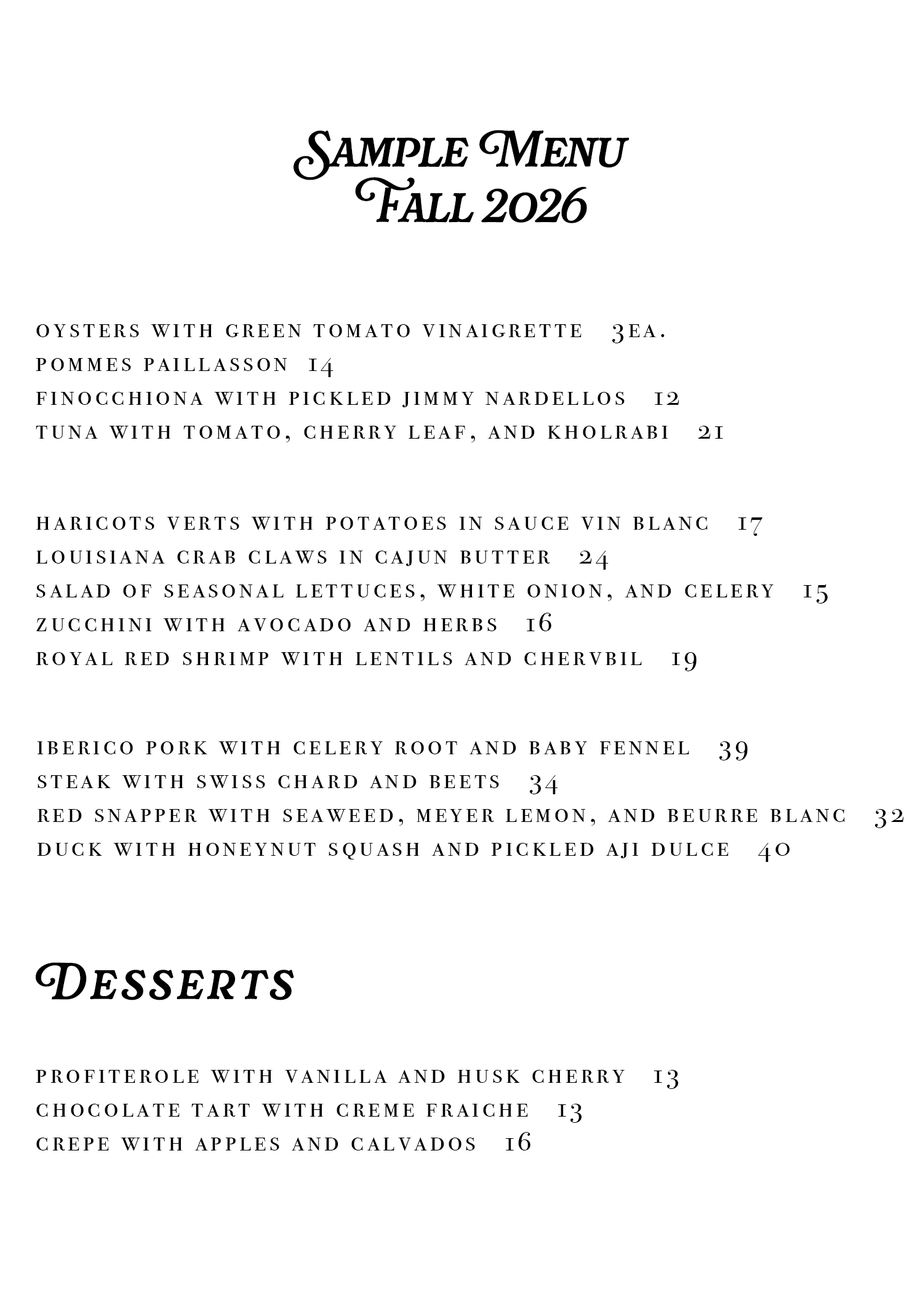
<style>
.page{position:relative;width:923px;height:1292px;background:#ffffff}
.page>*{position:absolute;margin:0}
.t1{font:46.1px "Rafaella-Bold";color:#000000}
.t2{font:28.2px "BodoniSvtyTwoSCITCTT-Book";letter-spacing:0.12em;color:#000000}
.t3{font:46.1px "Rafaella-Bold";letter-spacing:0.12em;color:#000000}
</style>
<div class="page">
<p class="t1" style="left:293px;top:130px;width:336px;height:93px;text-align:center">Sample Menu <br>Fall 2026</p>
<p class="t2" style="left:36px;top:324px;width:687px;height:118px">oysters with green tomato vinaigrette  3ea.<br>pommes paillasson  14<br>finocchiona with pickled jimmy nardellos   12<br>tuna with tomato, cherry leaf, and kholrabi   21</p>
<p class="t2" style="left:36px;top:517px;width:792px;height:154px">haricots verts with potatoes in sauce vin blanc   17<br>louisiana crab claws in cajun butter   24<br>salad of seasonal lettuces, white onion, and celery   15<br>zucchini with avocado and herbs   16<br>royal red shrimp with lentils and chervbil   19</p>
<p class="t2" style="left:37px;top:741px;width:867px;height:121px">iberico pork with celery root and baby fennel   39<br>steak with swiss chard and beets   34<br>red snapper with seaweed, meyer lemon, and beurre blanc   32<br>duck with honeynut squash and pickled aji dulce   40</p>
<p class="t3" style="left:36px;top:962px;width:258px;height:38px">Desserts</p>
<p class="t2" style="left:36px;top:1070px;width:643px;height:81px">profiterole with vanilla and husk cherry   13<br>chocolate tart with creme fraiche   13<br>crepe with apples and calvados   16</p>
</div>
